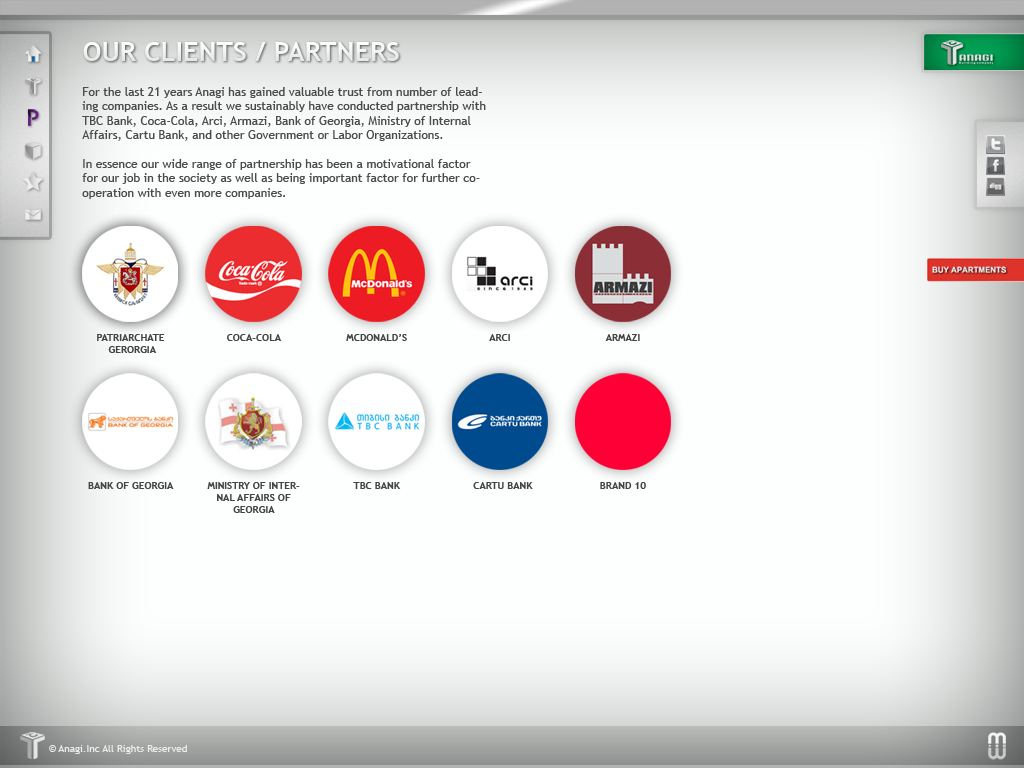
<style>
.page{position:relative;width:1024px;height:768px;background:#fcfffd}
.page>*{position:absolute;margin:0}
.t1{font:27px "TrebuchetMS-Bold";color:#ffffff}
.t2{font:12px "TrebuchetMS";color:#4b4b4b}
.t3{font:10px "TrebuchetMS-Bold";color:#444444}
.t4{font:10px "TrebuchetMS-Bold";color:#454545}
.t5{font:10px "TrebuchetMS";color:#eeeeee}
</style>
<div class="page">
<p class="t1" style="left:83px;top:42px;width:316px;height:19px">OUR CLIENTS / PARTNERS</p>
<p class="t2" style="left:82px;top:87px;width:404px;height:112px">For the last 21 years Anagi has gained valuable trust from number of leading companies. As a result we sustainably have conducted partnership with TBC Bank, Coca-Cola, Arci, Armazi, Bank of Georgia, Ministry of Internal Affairs, Cartu Bank, and other Government or Labor Organizations.<br><br>In essence our wide range of partnership has been a motivational factor for our job in the society as well as being important factor for further co-operation with even more companies.</p>
<p class="t3" style="left:97px;top:334px;width:68px;height:19px;text-align:center">PATRIARCHATE<br> GERORGIA</p>
<p class="t4" style="left:227px;top:334px;width:55px;height:7px">COCA-COLA</p>
<p class="t4" style="left:346px;top:334px;width:61px;height:7px">MCDONALD’S</p>
<p class="t4" style="left:489px;top:334px;width:21px;height:7px">ARCI</p>
<p class="t4" style="left:605px;top:334px;width:35px;height:7px">ARMAZI</p>
<p class="t4" style="left:88px;top:482px;width:86px;height:7px">BANK OF GEORGIA</p>
<p class="t4" style="left:207px;top:482px;width:93px;height:31px;text-align:center">MINISTRY OF INTERNAL AFFAIRS OF GEORGIA</p>
<p class="t4" style="left:353px;top:482px;width:48px;height:7px">TBC BANK</p>
<p class="t4" style="left:473px;top:482px;width:60px;height:7px">CARTU BANK</p>
<p class="t4" style="left:600px;top:482px;width:46px;height:7px">BRAND 10</p>
<p class="t5" style="left:49px;top:745px;width:138px;height:9px">© Anagi.Inc All Rights Reserved</p>
</div>
